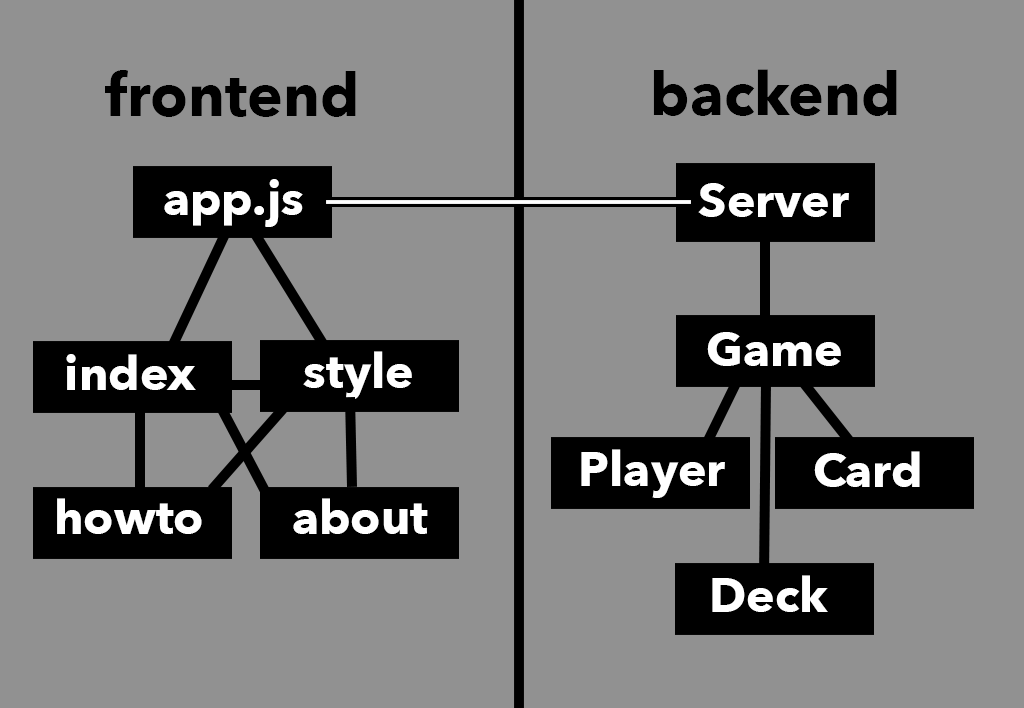
<style>
.page{position:relative;width:1024px;height:708px;background:#919191}
.page>*{position:absolute;margin:0}
.t1{font:60px "AvenirNext-Bold";color:#000000}
.t2{font:48px "AvenirNext-Bold";color:#ffffff}
</style>
<div class="page">
<p class="t1" style="left:105px;top:70px;width:251px;height:47px">frontend</p>
<p class="t1" style="left:653px;top:69px;width:244px;height:47px">backend</p>
<p class="t2" style="left:164px;top:179px;width:139px;height:48px">app.js</p>
<p class="t2" style="left:698px;top:183px;width:151px;height:34px">Server</p>
<p class="t2" style="left:707px;top:332px;width:134px;height:34px">Game</p>
<p class="t2" style="left:303px;top:351px;width:109px;height:49px">style</p>
<p class="t2" style="left:66px;top:354px;width:130px;height:36px">index</p>
<p class="t2" style="left:581px;top:449px;width:144px;height:49px">Player</p>
<p class="t2" style="left:814px;top:451px;width:106px;height:36px">Card</p>
<p class="t2" style="left:57px;top:498px;width:145px;height:36px">howto</p>
<p class="t2" style="left:293px;top:498px;width:135px;height:36px">about</p>
<p class="t2" style="left:712px;top:575px;width:116px;height:37px">Deck</p>
</div>
